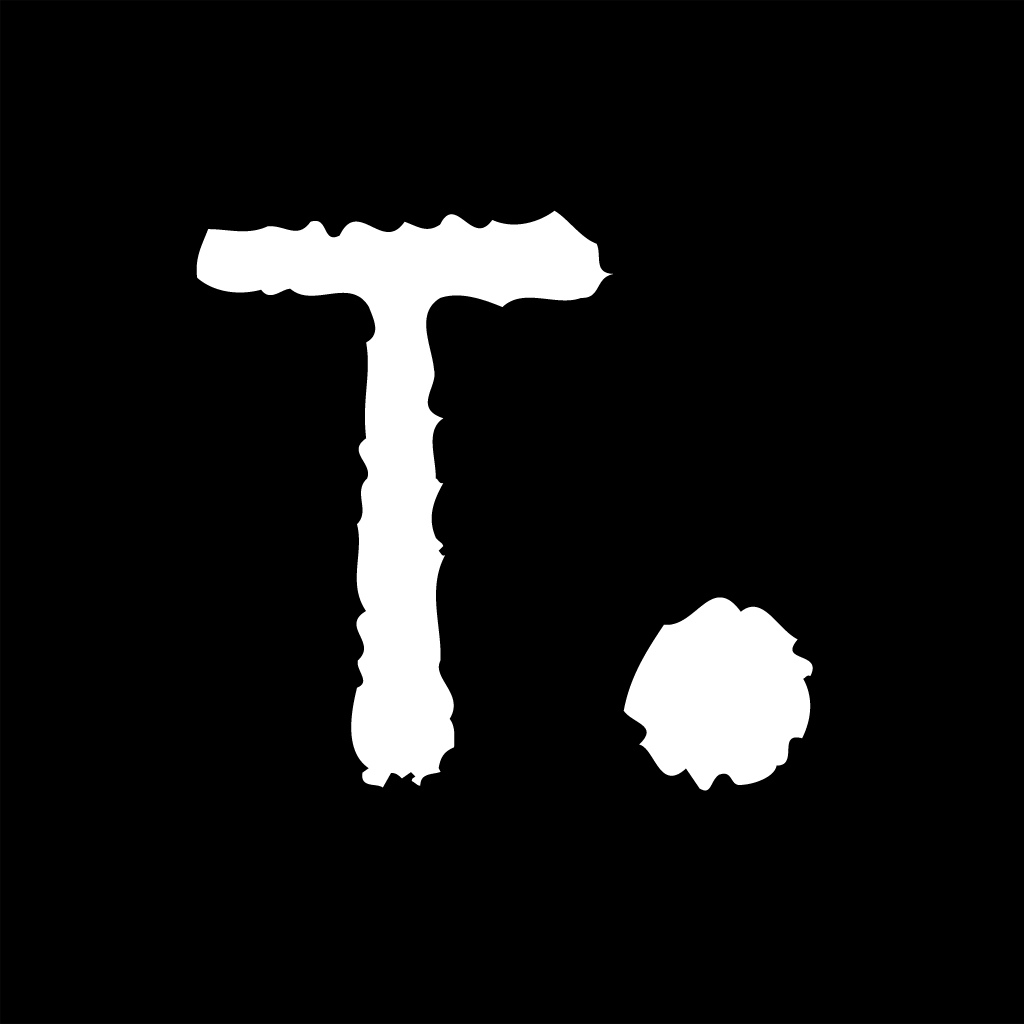
<style>
.page{position:relative;width:1024px;height:1024px;background:#000000}
.page>*{position:absolute;margin:0}
.t1{font:913.5px "Magda-Plain";letter-spacing:-0.2em;color:#ffffff}
.t2{font:913.5px "Magda-Thin";letter-spacing:-0.2em;color:#ffffff}
</style>
<div class="page">
<p class="t1" style="left:196px;top:210px;width:617px;height:581px">T<span class="t2">.</span></p>
</div>
